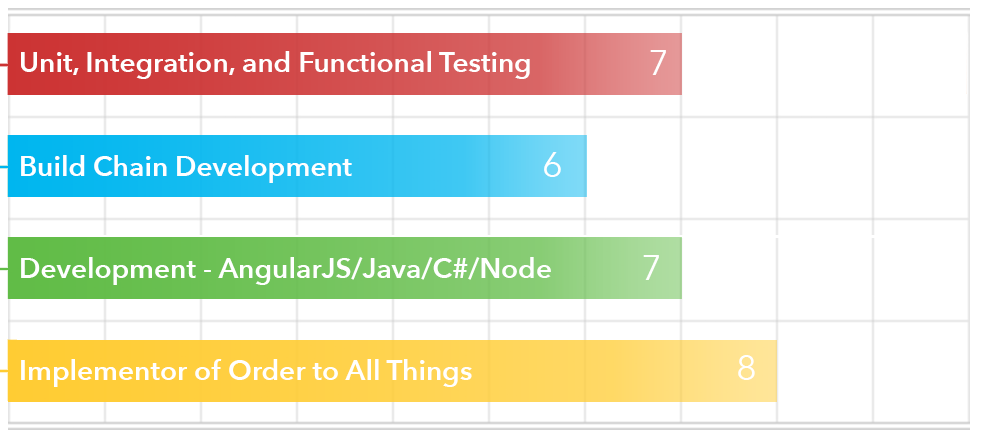
<style>
.page{position:relative;width:982px;height:442px;background:#ffffff}
.page>*{position:absolute;margin:0}
.t1{font:28px "AvenirNext-DemiBold";color:#ffffff}
.t2{font:36px "AvenirNext-Regular";color:#ffffff}
</style>
<div class="page">
<p class="t1" style="left:21px;top:51px;width:509px;height:28px">Unit, Integration, and Functional Testing</p>
<p class="t2" style="left:650px;top:50px;width:16px;height:25px">7</p>
<p class="t1" style="left:21px;top:155px;width:331px;height:28px">Build Chain Development</p>
<p class="t2" style="left:544px;top:152px;width:17px;height:25px">6</p>
<p class="t1" style="left:21px;top:257px;width:530px;height:28px">Development - AngularJS/Java/C#/Node</p>
<p class="t2" style="left:643px;top:255px;width:16px;height:25px">7</p>
<p class="t1" style="left:21px;top:359px;width:451px;height:28px">Implementor of Order to All Things</p>
<p class="t2" style="left:738px;top:355px;width:17px;height:25px">8</p>
</div>
